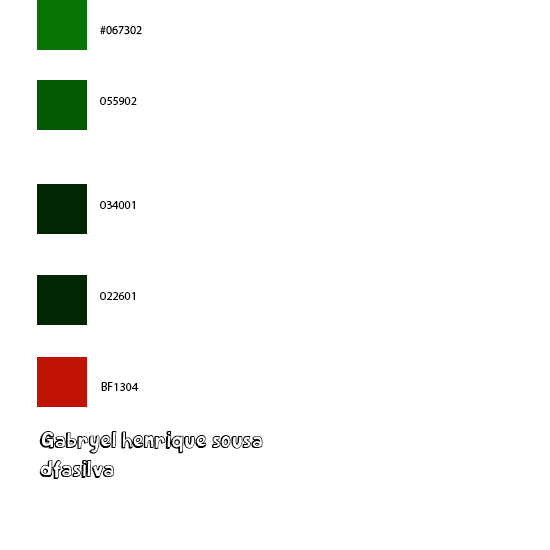
<style>
.page{position:relative;width:550px;height:550px;background:#ffffff}
.page>*{position:absolute;margin:0}
.t1{font:12px "MyriadPro-Regular";color:#000000}
.t2{font:24px "GameOnPersonalUseOnly";color:#000000}
</style>
<div class="page">
<p class="t1" style="left:100px;top:25px;width:42px;height:10px">#067302</p>
<p class="t1" style="left:100px;top:97px;width:37px;height:8px">055902</p>
<p class="t1" style="left:100px;top:201px;width:35px;height:8px">034001</p>
<p class="t1" style="left:100px;top:292px;width:35px;height:8px">022601</p>
<p class="t1" style="left:101px;top:382px;width:38px;height:9px">BF1304</p>
<p class="t2" style="left:39px;top:431px;width:224px;height:48px">Gabryel henrique sousa dfasilva</p>
</div>
